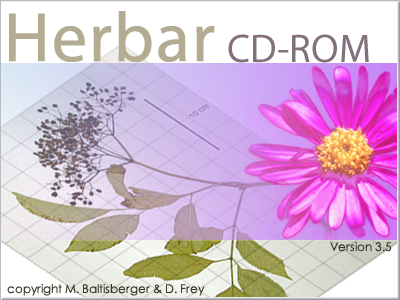
<style>
.page{position:relative;width:400px;height:300px}
.page>*{position:absolute;margin:0}
.t1{font:70px "MyriadPro-Regular";color:#b3ac92;font-weight:bold}
.t2{font:40px "MyriadPro-Regular";color:#82707c}
.t3{font:12px "CenturyGothic";color:#3b3728}
</style>
<div class="page">
<p class="t1" style="left:9px;top:11px;width:206px;height:51px">Herbar</p>
<p class="t2" style="left:228px;top:34px;width:141px;height:29px">CD-ROM</p>
<p class="t3" style="left:330px;top:242px;width:62px;height:10px">Version 3.5</p>
<p class="t3" style="left:7px;top:284px;width:198px;height:12px">copyright M. Baltisberger &amp; D. Frey</p>
</div>
